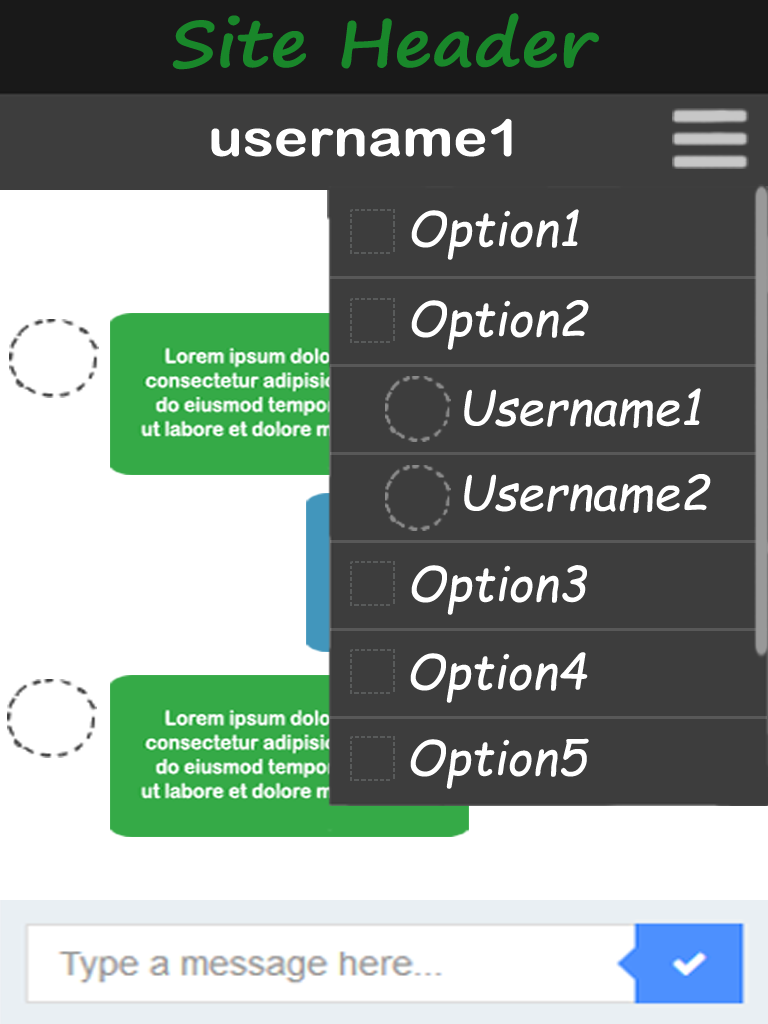
<style>
.page{position:relative;width:768px;height:1024px;background:#3d3d3d}
.page>*{position:absolute;margin:0}
.t1{font:64px "SegoePrint-Bold";color:#19872a;scale:1.12 1}
.t2{font:51.2px "ArialRoundedMTBold";color:#ffffff;scale:1.12 1}
.t3{font:48px "ComicSansMS-Italic";color:#ffffff}
</style>
<div class="page">
<p class="t1" style="left:172px;top:13px;width:427px;height:57px">Site Header</p>
<p class="t2" style="left:211px;top:118px;width:301px;height:39px">username1</p>
<p class="t3" style="left:411px;top:209px;width:168px;height:51px">Option1</p>
<p class="t3" style="left:411px;top:300px;width:178px;height:50px">Option2</p>
<p class="t3" style="left:464px;top:388px;width:237px;height:40px">Username1</p>
<p class="t3" style="left:464px;top:474px;width:247px;height:39px">Username2</p>
<p class="t3" style="left:411px;top:565px;width:176px;height:50px">Option3</p>
<p class="t3" style="left:410px;top:652px;width:178px;height:51px">Option4</p>
<p class="t3" style="left:410px;top:738px;width:179px;height:51px">Option5</p>
</div>
